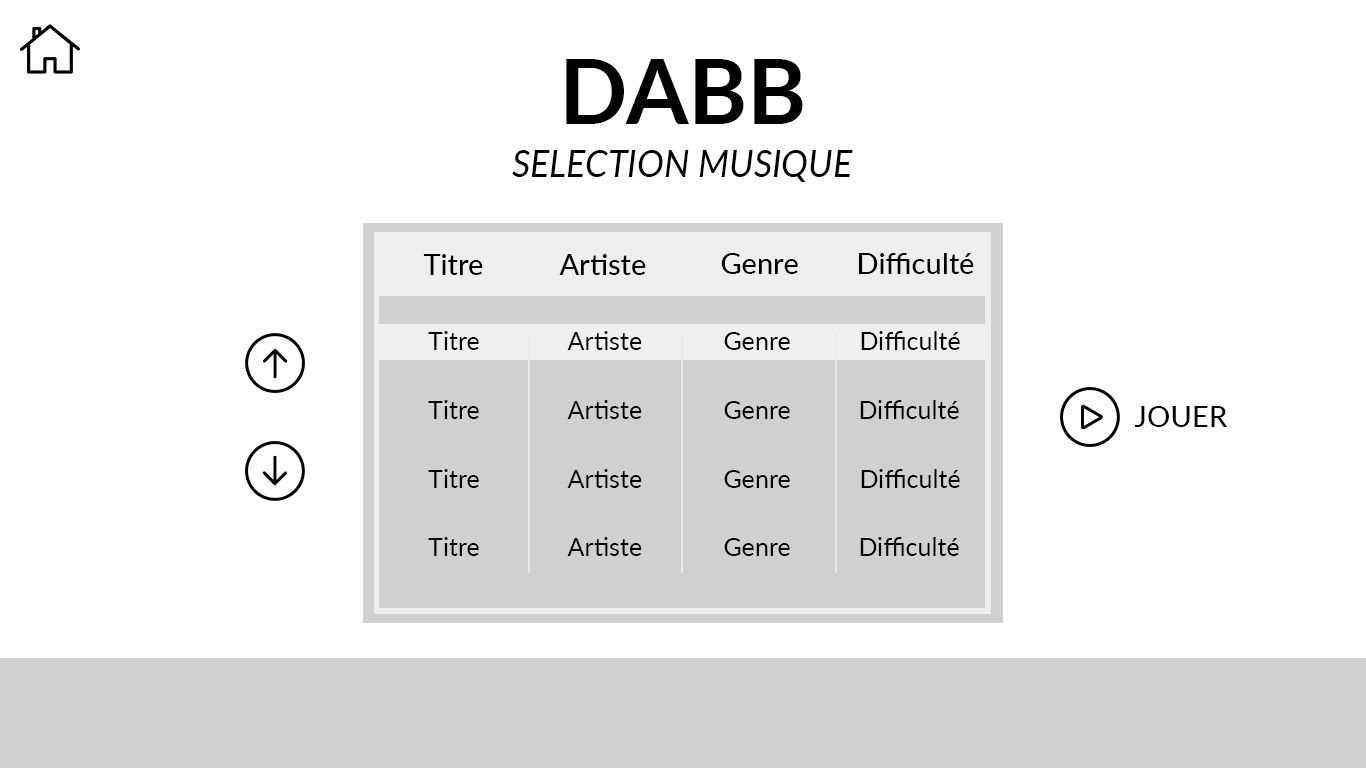
<style>
.page{position:relative;width:1366px;height:768px;background:#ffffff}
.page>*{position:absolute;margin:0}
.t1{font:90px "Lato-Bold";color:#010101}
.t2{font:36px "Lato-Italic";color:#000000}
.t3{font:29.2px "Lato-Medium";color:#000000}
.t4{font:25px "Lato-Regular";color:#000000}
</style>
<div class="page">
<p class="t1" style="left:566px;top:59px;width:237px;height:65px">DABB</p>
<p class="t2" style="left:512px;top:150px;width:341px;height:32px">SELECTION MUSIQUE</p>
<p class="t3" style="left:423px;top:254px;width:60px;height:21px">Titre</p>
<p class="t3" style="left:559px;top:254px;width:87px;height:21px">Artiste</p>
<p class="t3" style="left:721px;top:253px;width:77px;height:21px">Genre</p>
<p class="t3" style="left:859px;top:253px;width:115px;height:21px">Difficulté</p>
<p class="t4" style="left:428px;top:331px;width:51px;height:19px">Titre</p>
<p class="t4" style="left:567px;top:331px;width:75px;height:19px">Artiste</p>
<p class="t4" style="left:724px;top:332px;width:66px;height:18px">Genre</p>
<p class="t4" style="left:861px;top:331px;width:99px;height:19px">Difficulté</p>
<p class="t4" style="left:428px;top:400px;width:51px;height:19px">Titre</p>
<p class="t4" style="left:567px;top:400px;width:75px;height:19px">Artiste</p>
<p class="t4" style="left:724px;top:401px;width:66px;height:18px">Genre</p>
<p class="t4" style="left:860px;top:400px;width:99px;height:19px">Difficulté</p>
<p class="t3" style="left:1134px;top:406px;width:94px;height:21px">JOUER</p>
<p class="t4" style="left:428px;top:469px;width:51px;height:19px">Titre</p>
<p class="t4" style="left:567px;top:469px;width:75px;height:19px">Artiste</p>
<p class="t4" style="left:724px;top:470px;width:66px;height:18px">Genre</p>
<p class="t4" style="left:861px;top:469px;width:99px;height:19px">Difficulté</p>
<p class="t4" style="left:428px;top:537px;width:51px;height:19px">Titre</p>
<p class="t4" style="left:567px;top:537px;width:75px;height:19px">Artiste</p>
<p class="t4" style="left:724px;top:538px;width:66px;height:18px">Genre</p>
<p class="t4" style="left:860px;top:537px;width:99px;height:19px">Difficulté</p>
</div>
